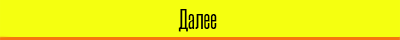
<style>
.page{position:relative;width:400px;height:40px;background:#f5ff10}
.page>*{position:absolute;margin:0}
.t1{font:24px "Steelfish-Regular";color:#000000}
</style>
<div class="page">
<p class="t1" style="left:178px;top:9px;width:39px;height:23px">Далее</p>
</div>
